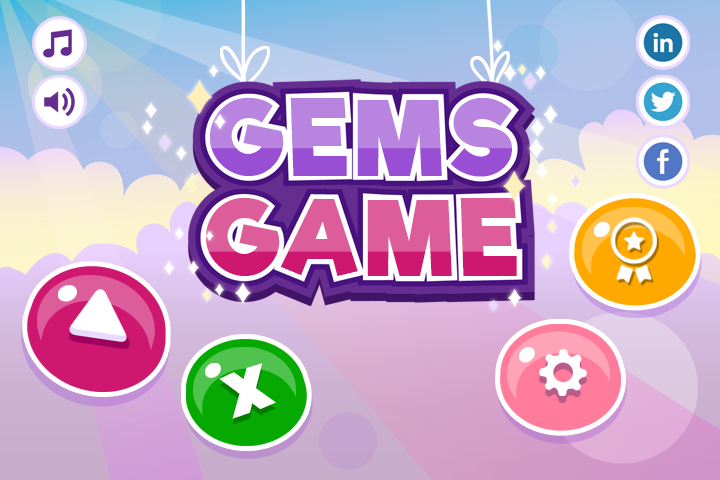
<style>
.page{position:relative;width:720px;height:480px}
.page>*{position:absolute;margin:0}
.t1{font:100.4px/100.4px "RifficFree-Bold";letter-spacing:0.075em}
.t2{font:81.3px "RifficFree-Bold";letter-spacing:0.075em;color:#ffffff}
</style>
<div class="page">
<p class="t1" style="left:206px;top:98px;width:311px;height:178px;text-align:center">GEMS <br>GAME</p>
<p class="t1" style="left:206px;top:98px;width:311px;height:178px;text-align:center">GEMS <br>GAME</p>
<p class="t2" style="left:219px;top:363px;width:57px;height:56px;rotate:-19deg">x</p>
<p class="t2" style="left:219px;top:369px;width:57px;height:56px;rotate:-19deg;opacity:0.37">x</p>
</div>
